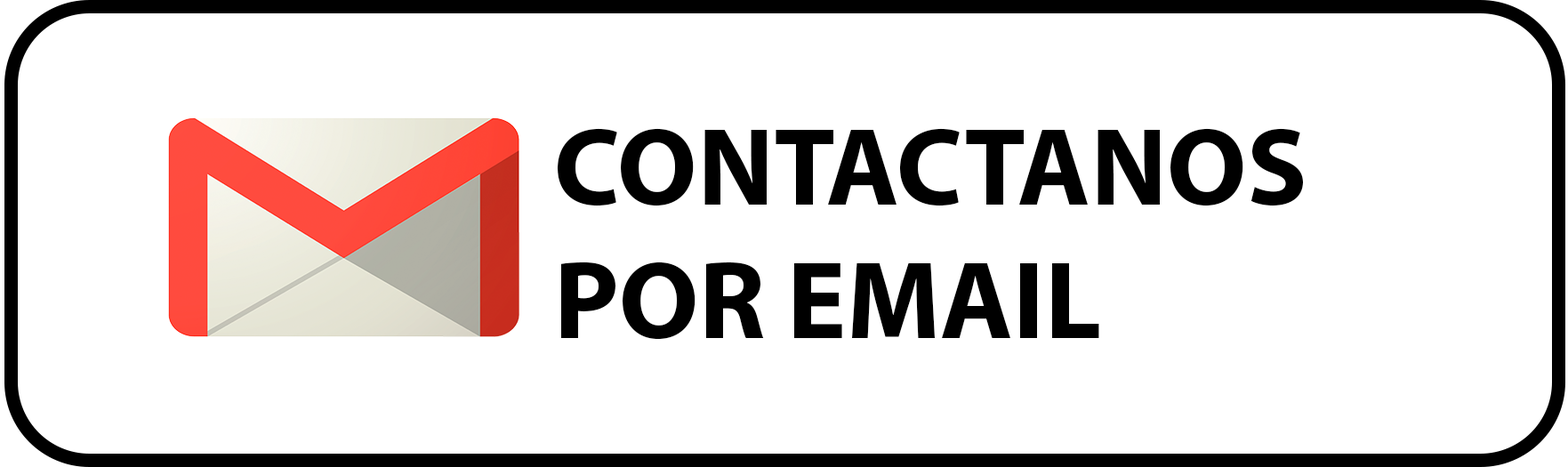
<style>
.page{position:relative;width:1568px;height:467px;background:#ffffff}
.page>*{position:absolute;margin:0}
.t1{font:111.2px "MyriadPro-Bold";color:#000000}
</style>
<div class="page">
<p class="t1" style="left:558px;top:128px;width:745px;height:212px">CONTACTANOS POR EMAIL</p>
</div>
